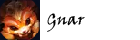
<style>
.page{position:relative;width:140px;height:40px;background:#ffffff}
.page>*{position:absolute;margin:0}
.t1{font:12px "VinerHandITC";color:#000000}
</style>
<div class="page">
<p class="t1" style="left:47px;top:13px;width:38px;height:19px">Gnar</p>
</div>
